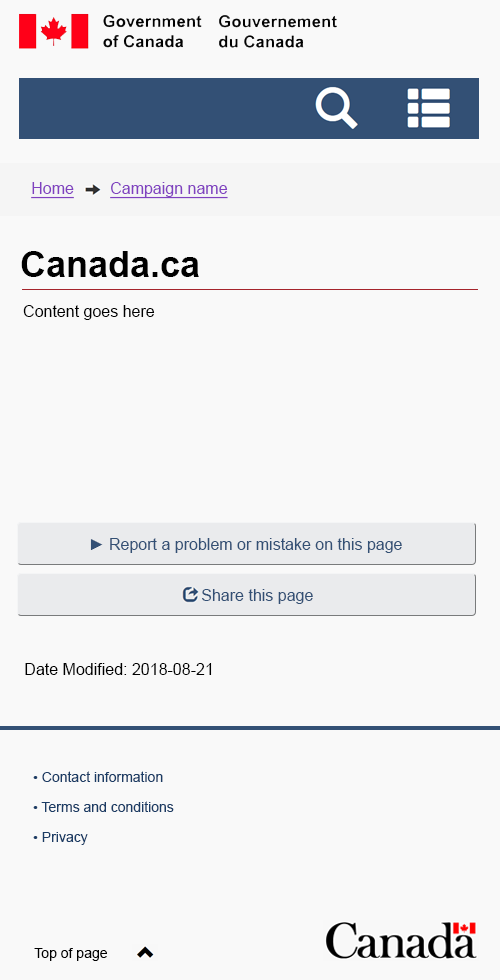
<style>
.page{position:relative;width:500px;height:980px;background:#f9f9f9}
.page>*{position:absolute;margin:0}
.t1{font:16px "ArialMT";color:#8041c0;text-decoration:underline}
.t2{font:36px "Arial-BoldMT";color:#000000}
.t3{font:16px "ArialMT";color:#000000}
.t4{font:16px "ArialMT";color:#335075}
.t5{font:14px/30px "ArialMT";color:#1b3c65}
.t6{font:14px "ArialMT";color:#000000}
</style>
<div class="page">
<p class="t1" style="left:31px;top:182px;width:43px;height:17px">Home</p>
<p class="t1" style="left:110px;top:182px;width:118px;height:17px">Campaign name</p>
<p class="t2" style="left:21px;top:251px;width:178px;height:26px">Canada.ca</p>
<p class="t3" style="left:23px;top:305px;width:132px;height:15px">Content goes here</p>
<p class="t4" style="left:90px;top:538px;width:312px;height:15px">► Report a problem or mistake on this page</p>
<p class="t4" style="left:202px;top:589px;width:111px;height:15px">Share this page</p>
<p class="t3" style="left:25px;top:663px;width:187px;height:12px">Date Modified: 2018-08-21</p>
<p class="t5" style="left:33px;top:771px;width:141px;height:74px">• Contact information<br>• Terms and conditions<br>• Privacy</p>
<p class="t6" style="left:34px;top:948px;width:73px;height:13px">Top of page</p>
</div>
